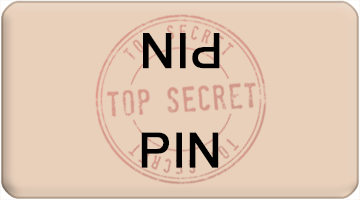
<style>
.page{position:relative;width:360px;height:200px;background:#e8d0bb}
.page>*{position:absolute;margin:0}
.t1{font:48px "ArialMT";color:#000000;font-weight:bold}
</style>
<div class="page">
<p class="t1" style="left:143px;top:33px;width:77px;height:36px;rotate:180deg">PIN</p>
<p class="t1" style="left:141px;top:132px;width:78px;height:36px">PIN</p>
</div>
